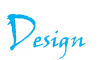
<style>
.page{position:relative;width:100px;height:60px;background:#ffffff}
.page>*{position:absolute;margin:0}
.t1{font:39.6px "VinerHandITC";color:#00aff0;scale:1.09 1}
.t2{font:21.2px "VinerHandITC";color:#00aff0;scale:1.11 1}
</style>
<div class="page">
<p class="t1" style="left:6px;top:13px;width:30px;height:38px;rotate:-14deg">D</p>
<p class="t2" style="left:33px;top:30px;width:53px;height:29px;rotate:1deg">esign</p>
</div>
